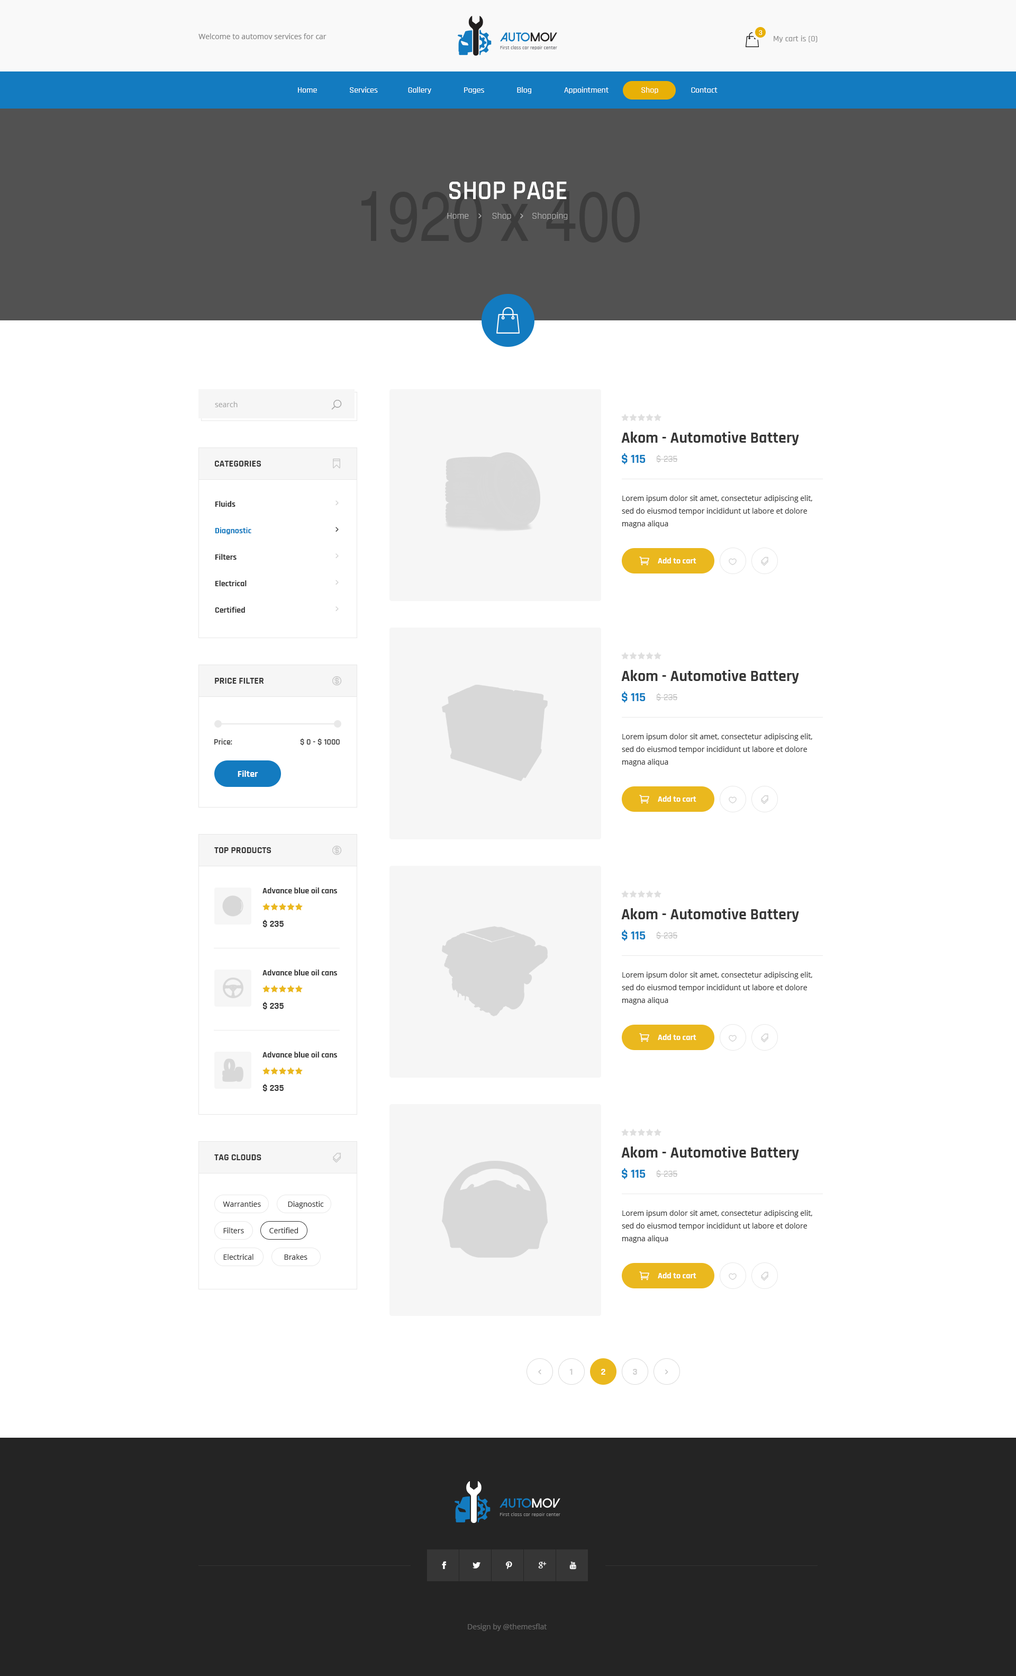
<style>
.page{position:relative;width:1016px;height:1676px;background:#ffffff}
.page>*{position:absolute;margin:0}
.t1{font:7.4px "OpenSans";color:#838383}
.t2{font:6.4px "Poppins-Regular";color:#ffffff}
.t3{font:8.5px "Rajdhani-Medium";color:#8f8f8f}
.t4{font:8.5px "Rajdhani-Medium";color:#ffffff}
.t5{font:26.5px "Rajdhani-SemiBold";color:#ffffff;text-transform:uppercase}
.t6{font:9.5px "Rajdhani-Regular";color:#b5b5b5}
.t7{font:7.4px "OpenSans";color:#a7a7a7}
.t8{font:15.9px "Rajdhani-Bold";color:#363636}
.t9{font:9.5px "Rajdhani-Bold";color:#363636;text-transform:uppercase}
.t10{font:12.7px "Rajdhani-Bold";color:#137bc0}
.t11{font:9.5px "Rajdhani-Regular";color:#b2b2b2}
.t12{font:7.4px/12.7px "OpenSans";color:#363636}
.t13{font:8.5px/26.5px "Rajdhani-Bold";color:#343434}
.t14{font:8.5px/26.5px "Rajdhani-Bold";color:#137bc0}
.t15{font:8.5px "Rajdhani-Bold";color:#ffffff}
.t16{font:8.5px "Rajdhani-SemiBold";color:#363636}
.t17{font:9.5px "Rajdhani-Bold";color:#ffffff}
.t18{font:8.5px "Rajdhani-Bold";color:#343434}
.t19{font:9.5px "Rajdhani-Bold";color:#363636}
.t20{font:7.4px "OpenSans";color:#343434}
.t21{font:9.5px "Rajdhani-Bold";color:#d0d0d0;text-transform:uppercase}
.t22{font:9.5px "Rajdhani-Bold";color:#ffffff;text-transform:uppercase}
.t23{font:7.4px "OpenSans";color:#6a6a6a}
</style>
<div class="page">
<p class="t1" style="left:199px;top:33px;width:128px;height:6px">Welcome to automov services for car</p>
<p class="t2" style="left:759px;top:30px;width:4px;height:5px">3</p>
<p class="t3" style="left:774px;top:35px;width:44px;height:7px">My cart is (0)</p>
<p class="t4" style="left:298px;top:87px;width:420px;height:7px">Home               Services              Gallery               Pages               Blog               Appointment               Shop               Contact</p>
<p class="t5" style="left:449px;top:182px;width:118px;height:17px">Shop page</p>
<p class="t6" style="left:447px;top:212px;width:121px;height:8px">Home         Shop        Shopping</p>
<p class="t7" style="left:215px;top:401px;width:23px;height:6px">search</p>
<p class="t8" style="left:622px;top:431px;width:177px;height:14px">Akom - Automotive Battery</p>
<p class="t9" style="left:215px;top:461px;width:47px;height:5px">Categories</p>
<p class="t10" style="left:622px;top:453px;width:24px;height:11px">$ 115</p>
<p class="t11" style="left:656px;top:455px;width:22px;height:8px">$ 235</p>
<p class="t12" style="left:622px;top:495px;width:191px;height:33px">Lorem ipsum dolor sit amet, consectetur adipiscing elit, sed do eiusmod tempor incididunt ut labore et dolore magna aliqua</p>
<p class="t13" style="left:215px;top:501px;width:36px;height:112px">Fluids<br><span class="t14">Diagnostic<br></span>Filters<br>Electrical<br>Certified</p>
<p class="t15" style="left:658px;top:557px;width:39px;height:6px">Add to cart</p>
<p class="t9" style="left:215px;top:678px;width:49px;height:5px">price filter</p>
<p class="t8" style="left:622px;top:670px;width:177px;height:13px">Akom - Automotive Battery</p>
<p class="t10" style="left:622px;top:691px;width:24px;height:12px">$ 115</p>
<p class="t11" style="left:656px;top:693px;width:22px;height:8px">$ 235</p>
<p class="t12" style="left:622px;top:733px;width:191px;height:33px">Lorem ipsum dolor sit amet, consectetur adipiscing elit, sed do eiusmod tempor incididunt ut labore et dolore magna aliqua</p>
<p class="t16" style="left:214px;top:738px;width:126px;height:7px">Price:         $ 0 - $ 1000</p>
<p class="t17" style="left:238px;top:770px;width:20px;height:7px">Filter</p>
<p class="t15" style="left:658px;top:796px;width:39px;height:6px">Add to cart</p>
<p class="t9" style="left:214px;top:847px;width:58px;height:6px">top products</p>
<p class="t18" style="left:263px;top:887px;width:74px;height:6px">Advance blue oil cans</p>
<p class="t8" style="left:622px;top:908px;width:177px;height:14px">Akom - Automotive Battery</p>
<p class="t19" style="left:263px;top:920px;width:21px;height:8px">$ 235</p>
<p class="t10" style="left:622px;top:930px;width:24px;height:11px">$ 115</p>
<p class="t11" style="left:656px;top:931px;width:22px;height:8px">$ 235</p>
<p class="t18" style="left:263px;top:969px;width:74px;height:6px">Advance blue oil cans</p>
<p class="t12" style="left:622px;top:971px;width:191px;height:33px">Lorem ipsum dolor sit amet, consectetur adipiscing elit, sed do eiusmod tempor incididunt ut labore et dolore magna aliqua</p>
<p class="t19" style="left:263px;top:1002px;width:21px;height:8px">$ 235</p>
<p class="t15" style="left:658px;top:1034px;width:39px;height:6px">Add to cart</p>
<p class="t18" style="left:263px;top:1051px;width:74px;height:6px">Advance blue oil cans</p>
<p class="t19" style="left:263px;top:1084px;width:21px;height:8px">$ 235</p>
<p class="t9" style="left:214px;top:1154px;width:48px;height:6px">Tag clouds</p>
<p class="t8" style="left:622px;top:1146px;width:177px;height:14px">Akom - Automotive Battery</p>
<p class="t10" style="left:622px;top:1168px;width:24px;height:11px">$ 115</p>
<p class="t11" style="left:656px;top:1169px;width:22px;height:8px">$ 235</p>
<p class="t20" style="left:223px;top:1201px;width:38px;height:6px">Warranties</p>
<p class="t20" style="left:288px;top:1201px;width:36px;height:7px">Diagnostic</p>
<p class="t12" style="left:622px;top:1210px;width:191px;height:33px">Lorem ipsum dolor sit amet, consectetur adipiscing elit, sed do eiusmod tempor incididunt ut labore et dolore magna aliqua</p>
<p class="t20" style="left:223px;top:1227px;width:21px;height:6px">Filters</p>
<p class="t20" style="left:269px;top:1227px;width:29px;height:6px">Certified</p>
<p class="t20" style="left:223px;top:1254px;width:31px;height:5px">Electrical</p>
<p class="t20" style="left:284px;top:1254px;width:24px;height:5px">Brakes</p>
<p class="t15" style="left:658px;top:1272px;width:39px;height:6px">Add to cart</p>
<p class="t21" style="left:570px;top:1369px;width:3px;height:5px">1</p>
<p class="t22" style="left:601px;top:1369px;width:5px;height:5px">2</p>
<p class="t21" style="left:633px;top:1369px;width:4px;height:5px">3</p>
<p class="t23" style="left:468px;top:1623px;width:79px;height:8px">Design by @themesflat</p>
</div>
